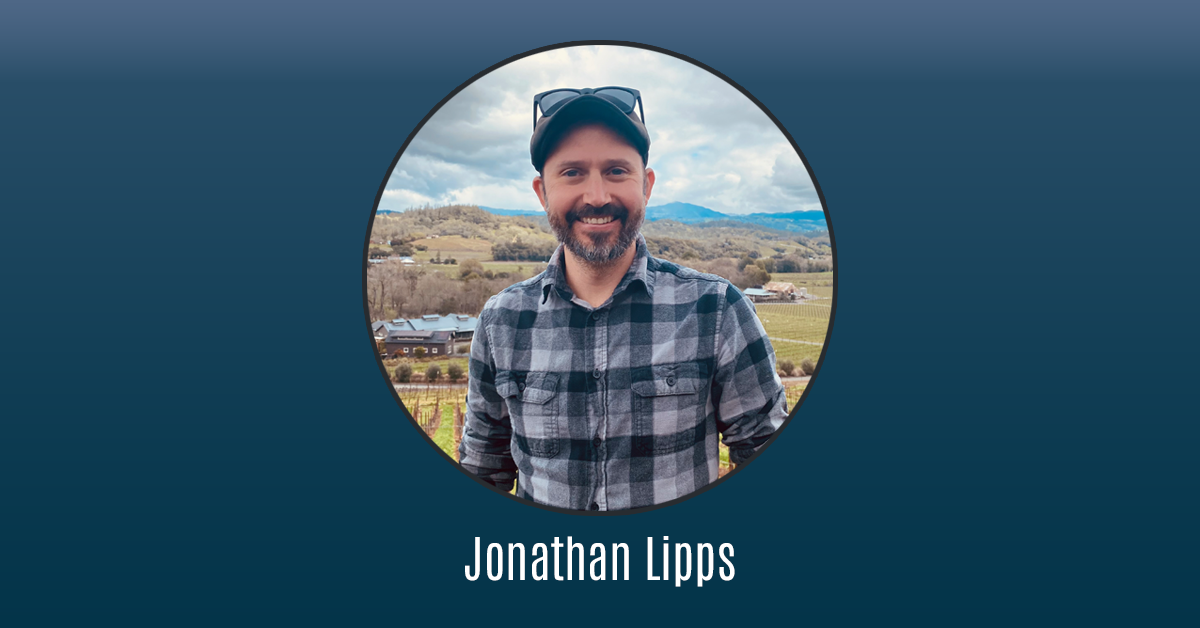
<style>
.page{position:relative;width:1200px;height:628px}
.page>*{position:absolute;margin:0}
.t1{font:50px "Antonio-Light";color:#ffffff}
</style>
<div class="page">
<p class="t1" style="left:465px;top:536px;width:270px;height:51px">Jonathan Lipps</p>
</div>
